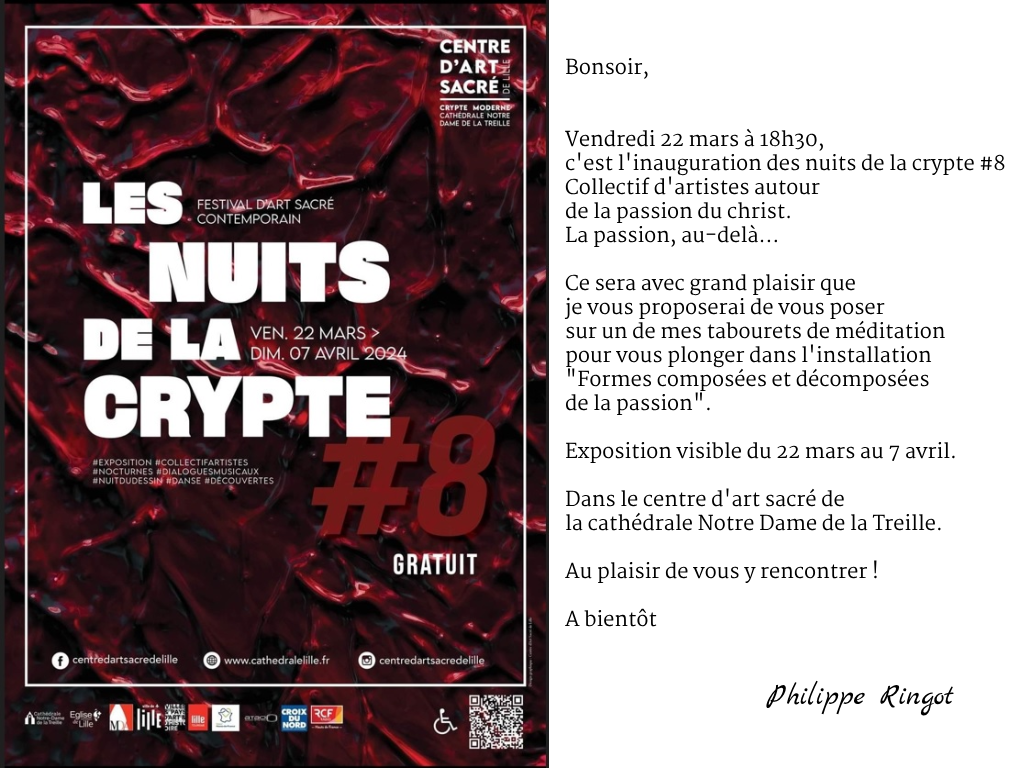
<style>
.page{position:relative;width:1024px;height:768px;background:#ffffff}
.page>*{position:absolute;margin:0}
.t1{font:20px "Martel-Regular";color:#000000}
.t2{font:30px "MarckScript-Regular";color:#000000}
</style>
<div class="page">
<p class="t1" style="left:564px;top:58px;width:441px;height:569px">Bonsoir,<br><br><br>Vendredi 22 mars à 18h30, <br>c'est l'inauguration des nuits de la crypte #8 <br>Collectif d'artistes autour<br>de la passion du christ.<br>La passion, au-delà...<br><br>Ce sera avec grand plaisir que <br>je vous proposerai de vous poser <br>sur un de mes tabourets de méditation <br>pour vous plonger dans l'installation <br>"Formes composées et décomposées <br>de la passion".<br><br>Exposition visible du 22 mars au 7 avril.<br><br>Dans le centre d'art sacré de <br>la cathédrale Notre Dame de la Treille.<br><br>Au plaisir de vous y rencontrer !<br><br>A bientôt</p>
<p class="t2" style="left:766px;top:680px;width:188px;height:36px">Philippe Ringot</p>
</div>
